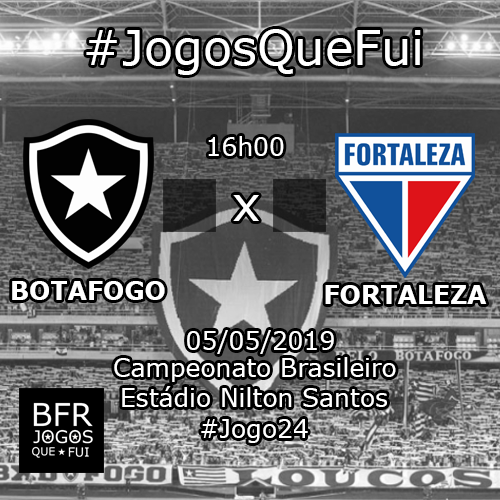
<style>
.page{position:relative;width:500px;height:500px}
.page>*{position:absolute;margin:0}
.t1{font:48px "Verdana";color:#ffffff}
.t2{font:25px "Verdana";color:#ffffff}
.t3{font:25px "Verdana-Bold";color:#ffffff}
</style>
<div class="page">
<p class="t1" style="left:86px;top:29px;width:335px;height:46px">#JogosQueFui</p>
<p class="t2" style="left:208px;top:136px;width:76px;height:20px">16h00</p>
<p class="t1" style="left:233px;top:195px;width:26px;height:26px">x</p>
<p class="t3" style="left:12px;top:281px;width:153px;height:19px">BOTAFOGO</p>
<p class="t3" style="left:325px;top:285px;width:162px;height:19px">FORTALEZA</p>
<p class="t2" style="left:187px;top:330px;width:147px;height:24px">05/05/2019</p>
<p class="t2" style="left:114px;top:357px;width:282px;height:25px">Campeonato Brasileiro</p>
<p class="t2" style="left:122px;top:386px;width:265px;height:21px">Estádio Nilton Santos</p>
<p class="t2" style="left:201px;top:419px;width:107px;height:24px">#Jogo24</p>
</div>
